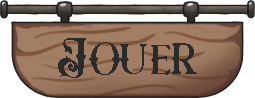
<style>
.page{position:relative;width:255px;height:98px;background:#ffffff}
.page>*{position:absolute;margin:0}
.t1{font:52.6px "RoseKnight-Regular";color:#2a2c2c}
</style>
<div class="page">
<p class="t1" style="left:58px;top:38px;width:139px;height:40px">Jouer</p>
</div>
